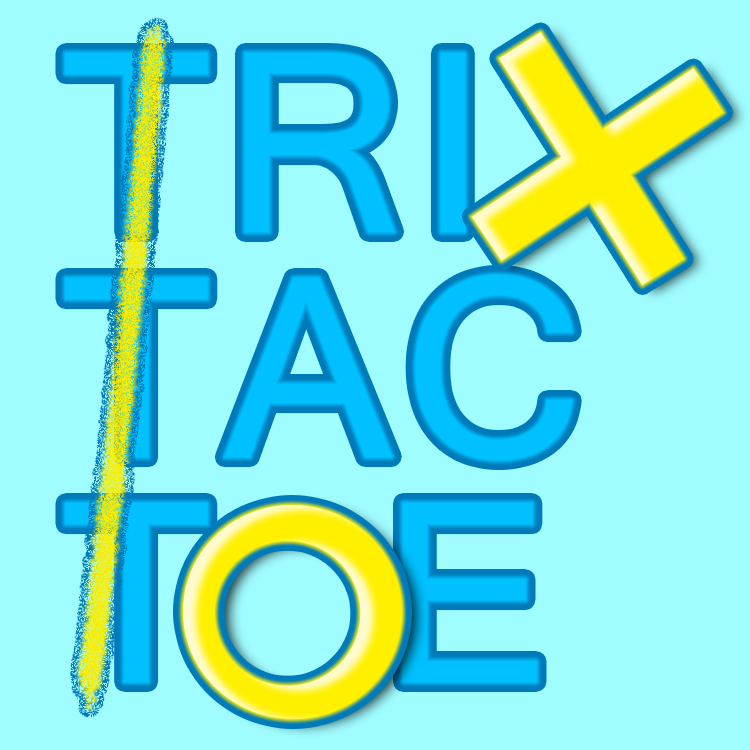
<style>
.page{position:relative;width:750px;height:750px;background:#9ffcff}
.page>*{position:absolute;margin:0}
.t1{font:250px/225px "MicrosoftSansSerif";letter-spacing:0.05em;color:#00c0ff}
</style>
<div class="page">
<p class="t1" style="left:65px;top:53px;width:507px;height:629px">TRI<br>TAC<br>T  E</p>
</div>
